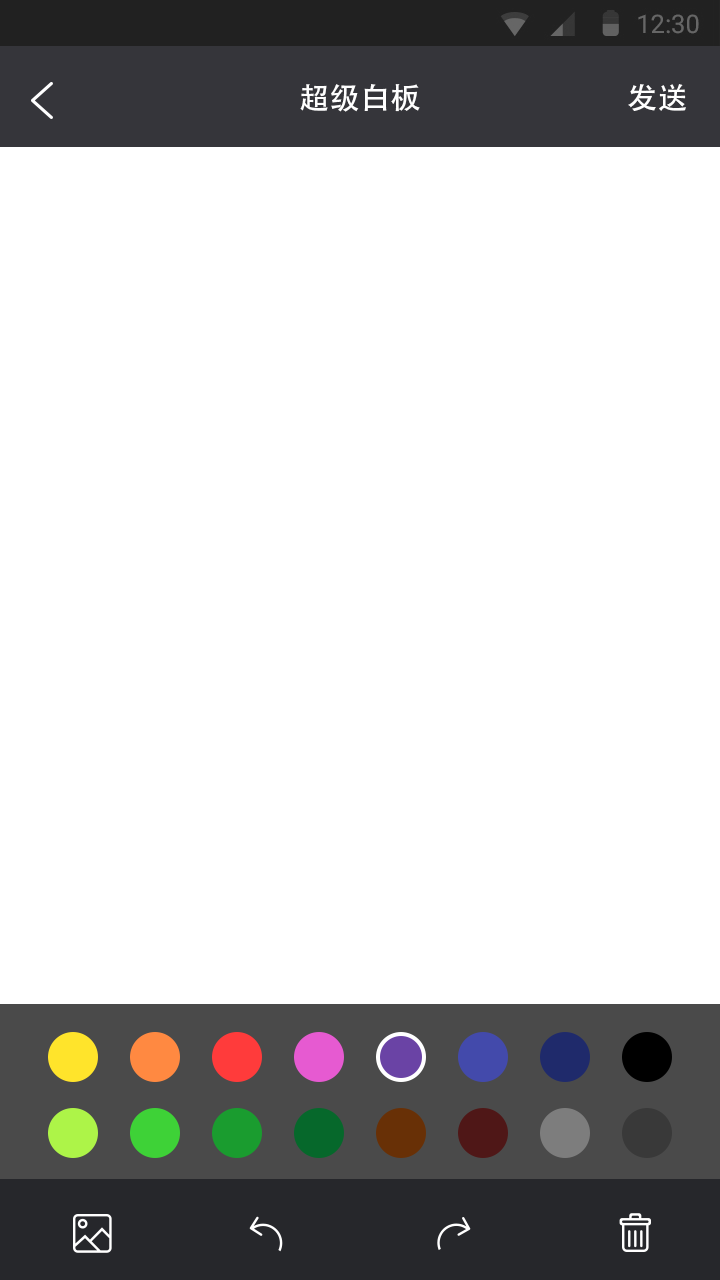
<style>
.page{position:relative;width:720px;height:1280px;background:#ffffff}
.page>*{position:absolute;margin:0}
.t1{font:30px "AdobeHeitiStd-Regular";color:#ffffff}
</style>
<div class="page">
<p class="t1" style="left:300px;top:84px;width:120px;height:28px">超级白板</p>
<p class="t1" style="left:628px;top:84px;width:58px;height:27px">发送</p>
</div>
